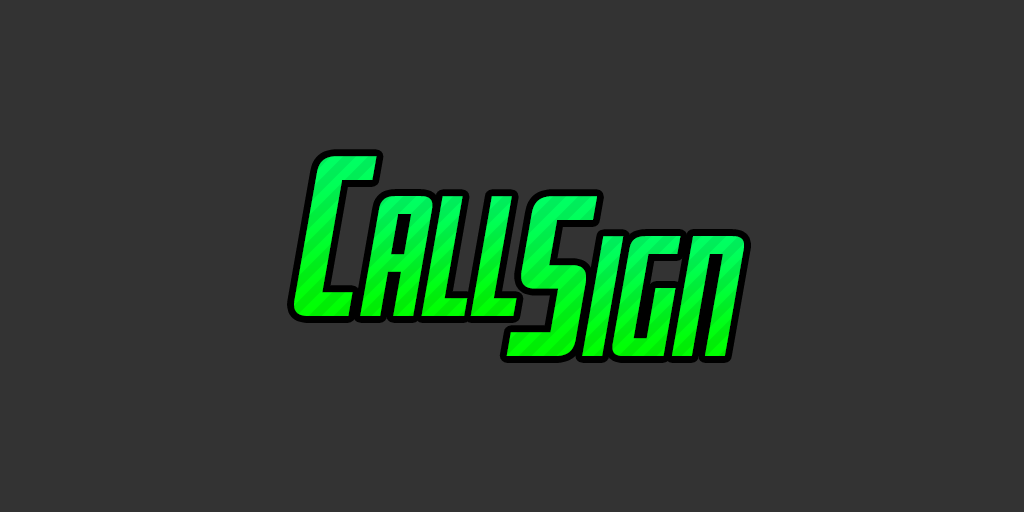
<style>
.page{position:relative;width:1024px;height:512px;background:#333333}
.page>*{position:absolute;margin:0}
.t1{font:200px "Fresno-Black";font-style:italic}
.t2{font:150px "Fresno-Black";font-style:italic}
</style>
<div class="page">
<p class="t1" style="left:294px;top:156px;width:83px;height:160px">C</p>
<p class="t2" style="left:360px;top:196px;width:157px;height:120px">all</p>
<p class="t1" style="left:506px;top:196px;width:91px;height:160px">s</p>
<p class="t2" style="left:582px;top:236px;width:162px;height:120px">ign</p>
</div>
